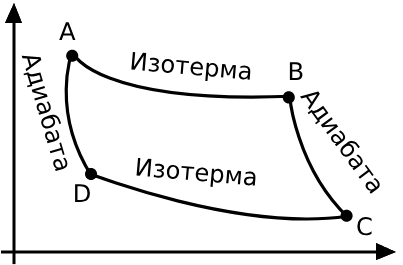
<style>
.page{position:relative;width:403px;height:265px;background:#ffffff}
.page>*{position:absolute;margin:0}
.t1{font:24.2px "DejaVuSans";color:#000000}
</style>
<div class="page">
<p class="t1" style="left:59px;top:22px;width:17px;height:18px">A</p>
<p class="t1" style="left:131px;top:52px;width:120px;height:29px;rotate:5deg">Изотерма</p>
<p class="t1" style="left:21px;top:55px;width:47px;height:116px;rotate:74deg">Адиабата</p>
<p class="t1" style="left:289px;top:62px;width:14px;height:18px">B</p>
<p class="t1" style="left:300px;top:91px;width:80px;height:103px;rotate:54deg">Адиабата</p>
<p class="t1" style="left:136px;top:158px;width:120px;height:29px;rotate:5deg">Изотерма</p>
<p class="t1" style="left:75px;top:184px;width:15px;height:18px">D</p>
<p class="t1" style="left:357px;top:217px;width:15px;height:19px">C</p>
</div>
